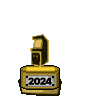
<style>
.page{position:relative;width:85px;height:96px;background:#ffffff}
.page>*{position:absolute;margin:0}
.t1{font:9.5px "InterTight-Black";letter-spacing:-0.04em;color:#000000}
</style>
<div class="page">
<p class="t1" style="left:28px;top:77px;width:24px;height:8px">2024</p>
</div>
